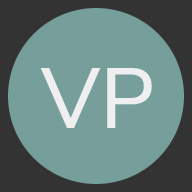
<style>
.page{position:relative;width:192px;height:192px;background:#769e9a}
.page>*{position:absolute;margin:0}
.t1{font:85.1px "NunitoSans-Medium";color:#efefef}
</style>
<div class="page">
<p class="t1" style="left:40px;top:68px;width:112px;height:60px">VP</p>
</div>
